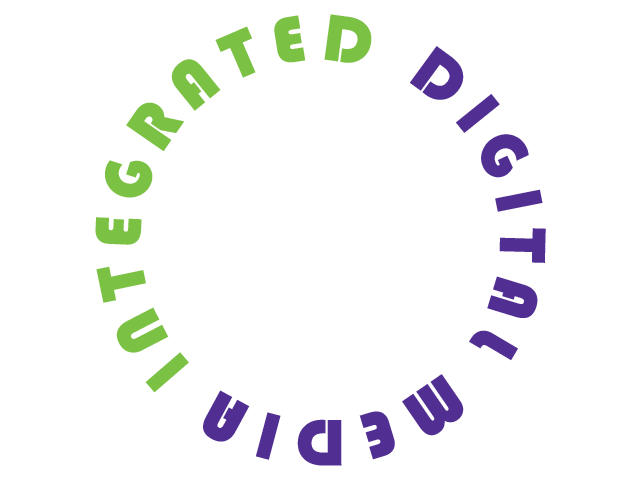
<style>
.page{position:relative;width:640px;height:480px;background:#ffffff}
.page>*{position:absolute;margin:0}
.t1{font:68.3px "Bauhaus93";letter-spacing:0.16em;color:#512e91}
.t2{font:68.3px "Bauhaus93";letter-spacing:0.16em;color:#7bc143}
</style>
<div class="page">
<p class="t1" style="left:95px;top:14px;width:451px;height:452px;rotate:-135deg"><span class="t2">INTEGRATED </span>DIGITAL MEDIA</p>
</div>
